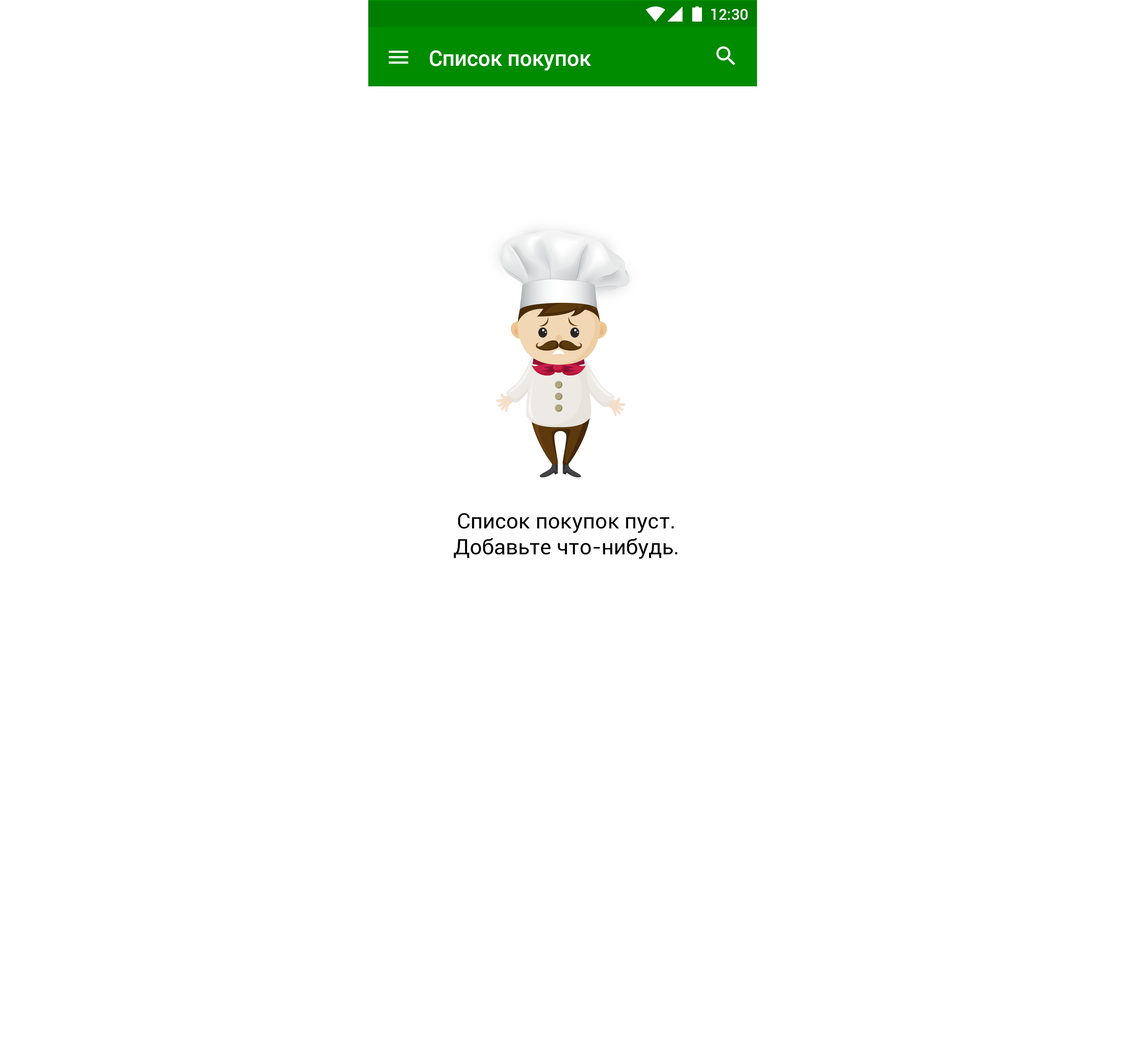
<style>
.page{position:relative;width:1126px;height:1059px;background:#ffffff}
.page>*{position:absolute;margin:0}
.t1{font:15.1px "Roboto-Medium";color:#ffffff}
.t2{font:21.6px "Roboto-Medium";color:#ffffff}
.t3{font:21.6px "Roboto-Regular";color:#000000}
</style>
<div class="page">
<p class="t1" style="left:711px;top:9px;width:36px;height:11px">12:30</p>
<p class="t2" style="left:430px;top:50px;width:161px;height:21px">Список покупок</p>
<p class="t3" style="left:453px;top:513px;width:224px;height:46px;text-align:center">Список покупок пуст.<br>Добавьте что-нибудь.</p>
</div>
